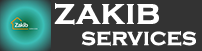
<style>
.page{position:relative;width:202px;height:51px;background:#333333}
.page>*{position:absolute;margin:0}
.t1{font:36px "CopperplateGothic-Bold";color:#ffffff}
.t2{font:24px "CopperplateGothic-Bold";color:#ffffff}
</style>
<div class="page">
<p class="t1" style="left:54px;top:3px;width:105px;height:22px">zakib</p>
<p class="t2" style="left:81px;top:31px;width:115px;height:15px">services</p>
</div>
